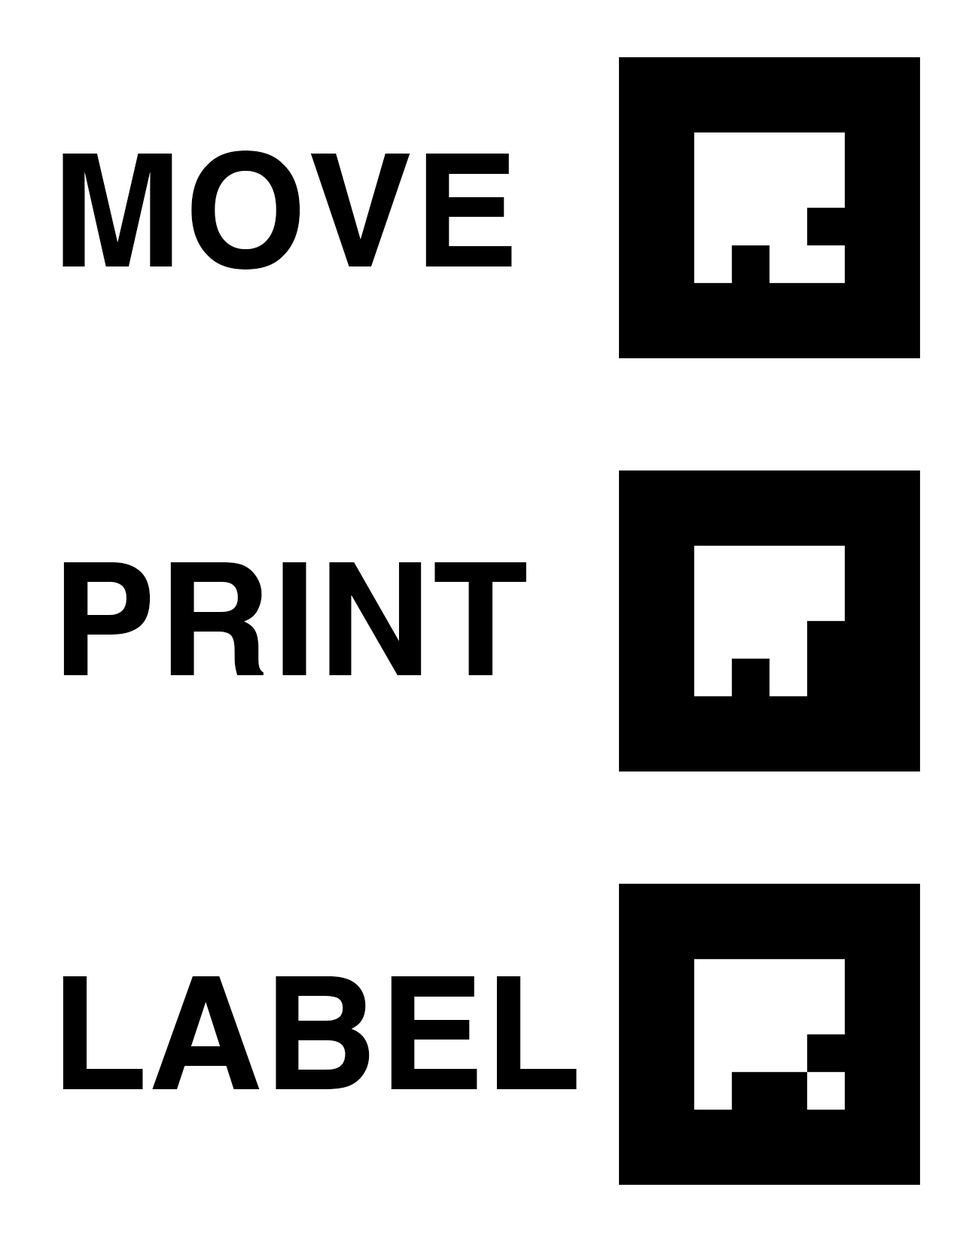
<style>
.page{position:relative;width:960px;height:1242px;background:#ffffff}
.page>*{position:absolute;margin:0}
.t1{font:157px "Helvetica-Bold";letter-spacing:0.01em;color:#000000}
</style>
<div class="page">
<p class="t1" style="left:62px;top:151px;width:450px;height:119px">MOVE</p>
<p class="t1" style="left:63px;top:562px;width:463px;height:113px">PRINT</p>
<p class="t1" style="left:62px;top:976px;width:515px;height:113px">LABEL</p>
</div>
